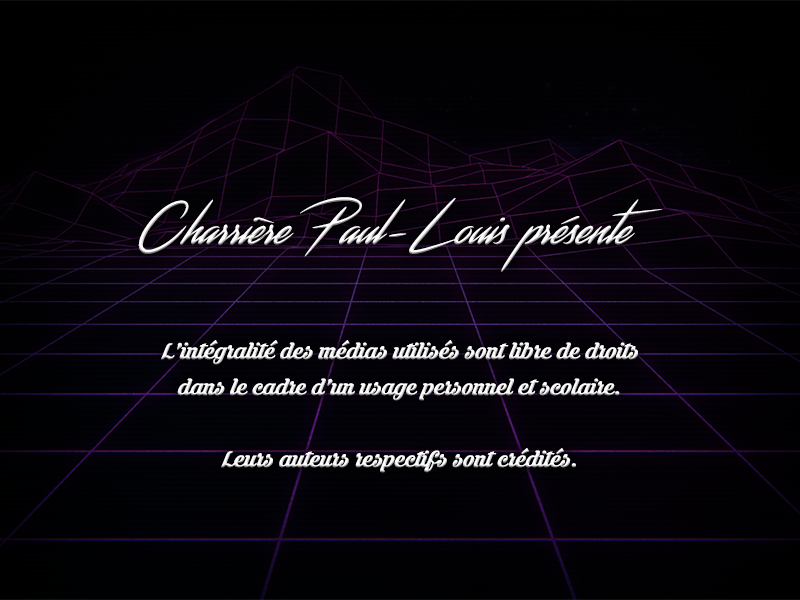
<style>
.page{position:relative;width:800px;height:600px}
.page>*{position:absolute;margin:0}
.t1{font:50px "Streamster";color:#ffffff}
.t2{font:30px "KrinkesRegularPERSONALUSE";color:#ffffff}
</style>
<div class="page">
<p class="t1" style="left:138px;top:197px;width:524px;height:75px">Charrière Paul-Louis présente</p>
<p class="t2" style="left:161px;top:340px;width:477px;height:133px;text-align:center">L'intégralité des médias utilisés sont libre de droits<br>dans le cadre d'un usage personnel et scolaire.<br><br>Leurs auteurs respectifs sont crédités.</p>
</div>
